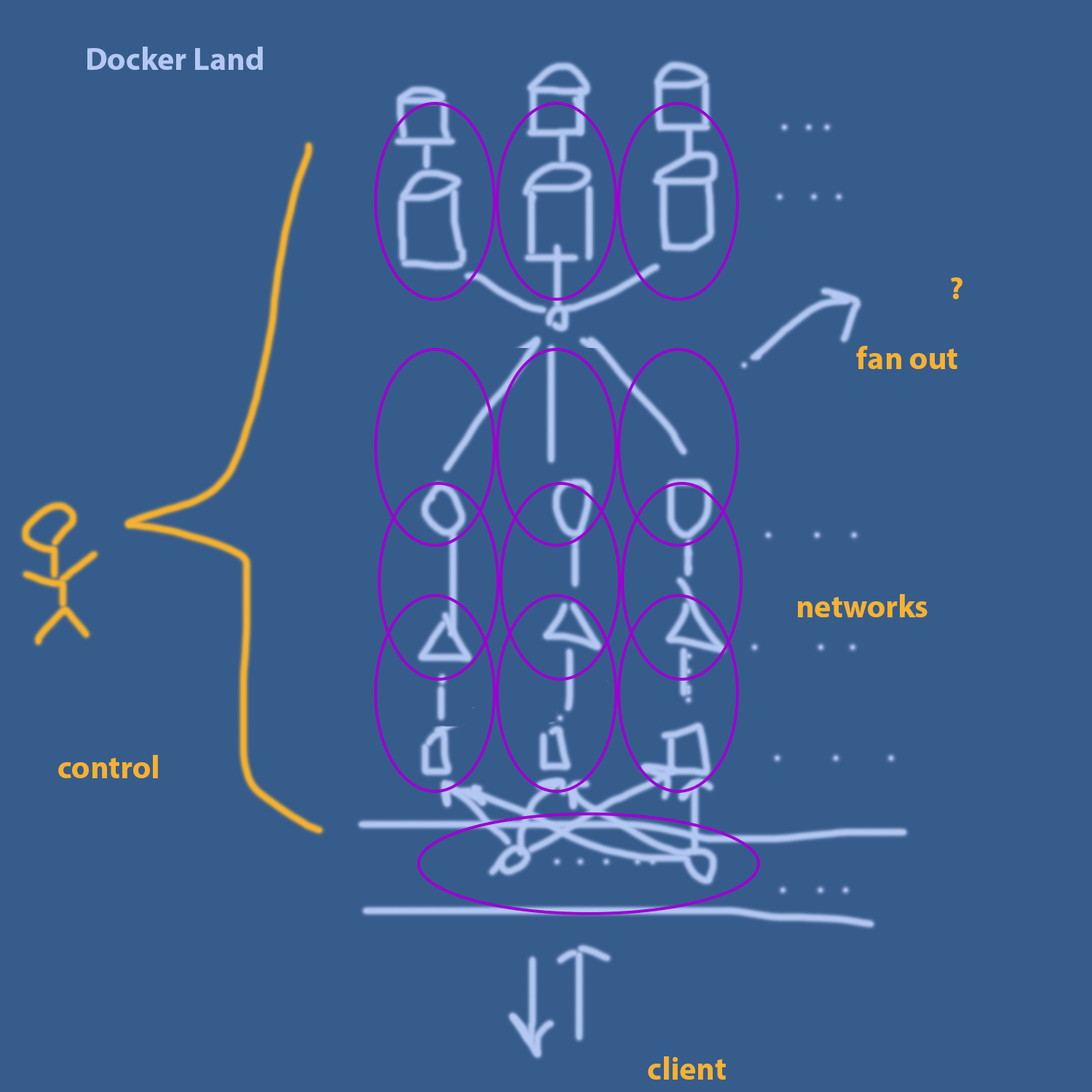
<style>
.page{position:relative;width:1092px;height:1092px;background:#365c8c}
.page>*{position:absolute;margin:0}
.t1{font:32px "MyriadPro-Bold";color:#b3c8f2}
.t2{font:32px "MyriadPro-Bold";color:#f6b230}
</style>
<div class="page">
<p class="t1" style="left:87px;top:47px;width:176px;height:23px">Docker Land</p>
<p class="t2" style="left:951px;top:277px;width:11px;height:22px">?</p>
<p class="t2" style="left:856px;top:346px;width:101px;height:23px">fan out</p>
<p class="t2" style="left:797px;top:594px;width:130px;height:23px">networks</p>
<p class="t2" style="left:58px;top:755px;width:100px;height:23px">control</p>
<p class="t2" style="left:648px;top:1056px;width:78px;height:24px">client</p>
</div>
